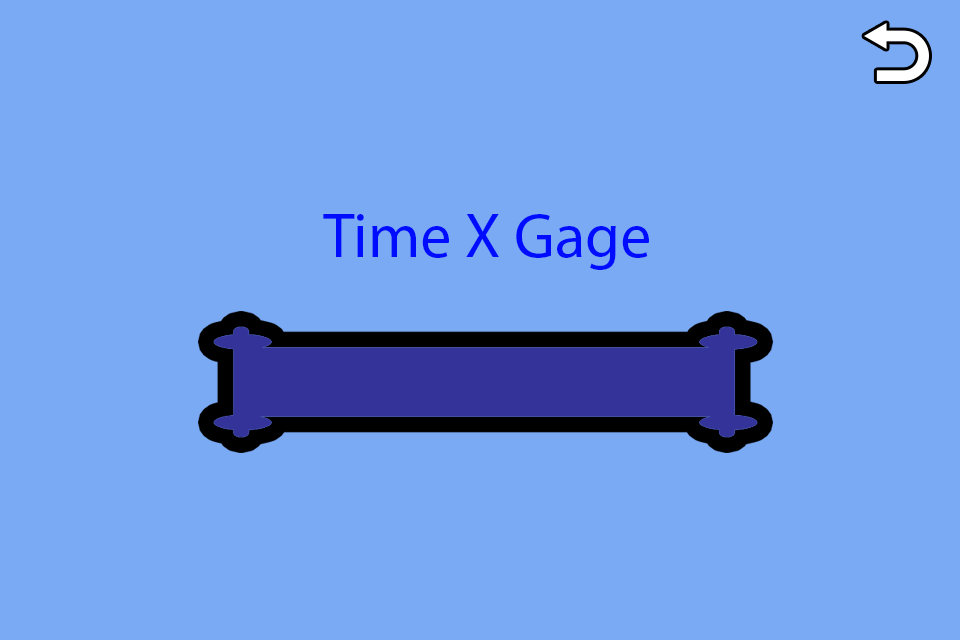
<style>
.page{position:relative;width:960px;height:640px;background:#7aaaf3}
.page>*{position:absolute;margin:0}
.t1{font:62.6px "MyriadPro-Regular";color:#000cff}
</style>
<div class="page">
<p class="t1" style="left:323px;top:214px;width:326px;height:56px">Time X Gage</p>
</div>
